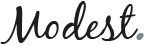
<style>
.page{position:relative;width:145px;height:46px;background:#ffffff}
.page>*{position:absolute;margin:0}
.t1{font:48px "BlackJackRegular";color:#1d1d1d}
.t2{font:72px "Fangtasia";color:#758b8d}
</style>
<div class="page">
<p class="t1" style="left:0px;top:1px;width:144px;height:43px">Modest<span class="t2">.</span></p>
</div>
